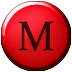
<style>
.page{position:relative;width:72px;height:72px;background:#ffffff}
.page>*{position:absolute;margin:0}
.t1{font:41.7px "Constantia";color:#380507}
</style>
<div class="page">
<p class="t1" style="left:18px;top:21px;width:36px;height:30px">M</p>
</div>
